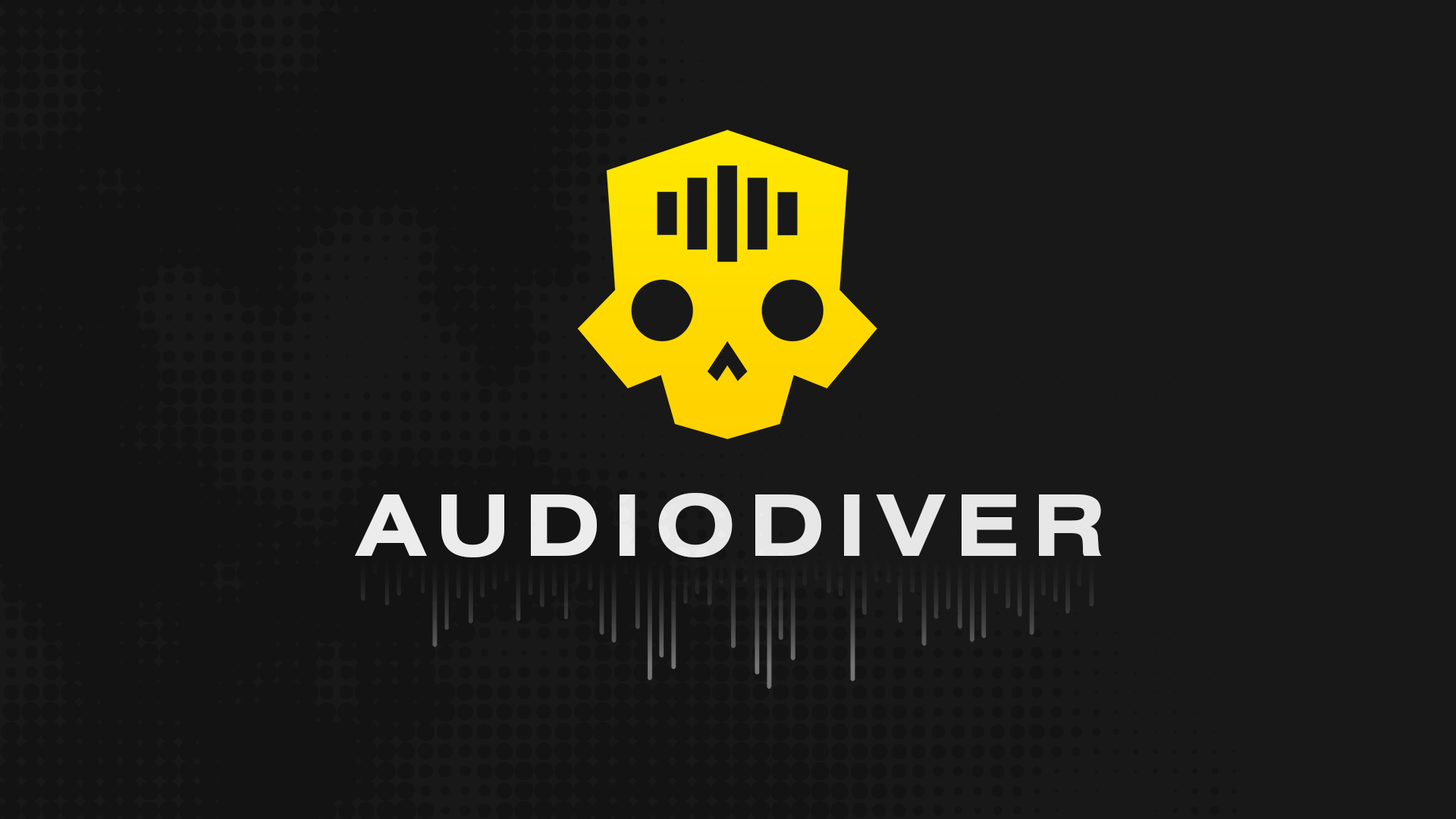
<style>
.page{position:relative;width:1456px;height:819px;background:#181818}
.page>*{position:absolute;margin:0}
.t1{font:85px "Swiss721BT-BoldExtended";letter-spacing:0.15em;color:#ffffff}
</style>
<div class="page">
<p class="t1" style="left:355px;top:493px;width:747px;height:64px">AUDIODIVER</p>
</div>
